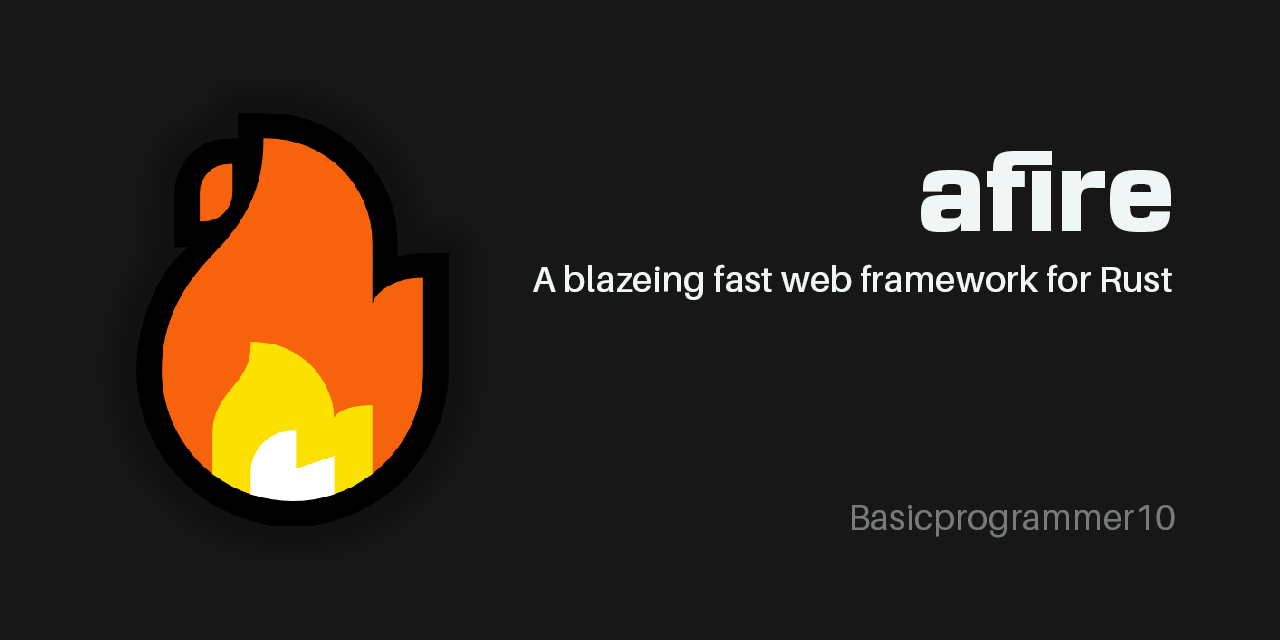
<style>
.page{position:relative;width:1280px;height:640px;background:#171718}
.page>*{position:absolute;margin:0}
.t1{font:100px "BasementGrotesque-Black";color:#f0f6f5}
.t2{font:36px "Aileron-SemiBold";color:#f0f6f5}
.t3{font:36px "Aileron-Regular";color:#787b7b}
</style>
<div class="page">
<p class="t1" style="left:921px;top:151px;width:250px;height:81px">afire</p>
<p class="t2" style="left:533px;top:264px;width:639px;height:36px">A blazeing fast web framework for Rust</p>
<p class="t3" style="left:852px;top:505px;width:323px;height:33px">Basicprogrammer10</p>
</div>
